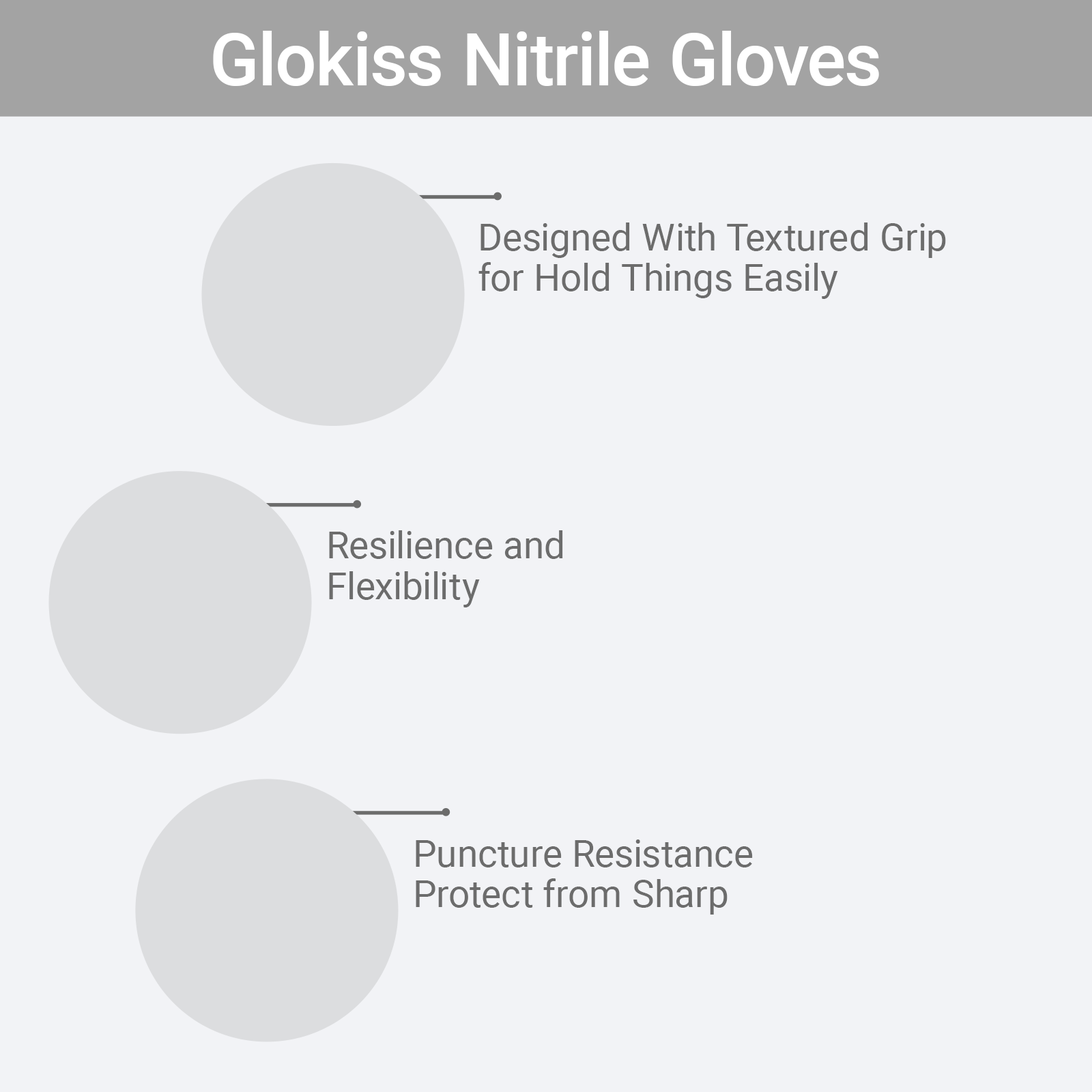
<style>
.page{position:relative;width:1092px;height:1092px;background:#f2f3f6}
.page>*{position:absolute;margin:0}
.t1{font:72.8px "Roboto-Medium";color:#ffffff}
.t2{font:37.9px/40.8px "Roboto-Regular";color:#6c6c6c}
</style>
<div class="page">
<p class="t1" style="left:213px;top:31px;width:666px;height:55px">Glokiss Nitrile Gloves</p>
<p class="t2" style="left:478px;top:222px;width:468px;height:77px">Designed With Textured Grip<br>for Hold Things Easily</p>
<p class="t2" style="left:329px;top:530px;width:234px;height:77px">Resilience and<br>Flexibility</p>
<p class="t2" style="left:416px;top:839px;width:337px;height:76px">Puncture Resistance<br>Protect from Sharp</p>
</div>
